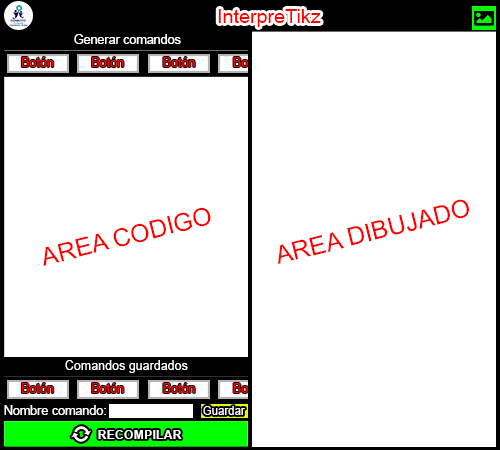
<style>
.page{position:relative;width:500px;height:450px;background:#ffffff}
.page>*{position:absolute;margin:0}
.t1{font:19.4px "ArialMT";color:#ff0000}
.t2{font:12.5px "ArialMT";color:#ffffff}
.t3{font:12.5px "ArialMT";color:#ff0000}
.t4{font:24.8px "ArialMT";color:#ff0000}
.t5{font:25px "ArialMT";color:#ff0000}
.t6{font:12.7px "ArialMT";color:#ffffff}
.t7{font:11.8px "ArialMT";color:#ffffff;scale:0.96 1}
.t8{font:12.5px "Arial-BoldMT";color:#ffffff}
</style>
<div class="page">
<p class="t1" style="left:218px;top:9px;width:103px;height:18px">InterpreTikz</p>
<p class="t2" style="left:74px;top:34px;width:107px;height:10px">Generar comandos</p>
<p class="t3" style="left:21px;top:57px;width:33px;height:10px">Botón</p>
<p class="t3" style="left:92px;top:57px;width:32px;height:10px">Botón</p>
<p class="t3" style="left:163px;top:57px;width:32px;height:10px">Botón</p>
<p class="t4" style="left:43px;top:207px;width:168px;height:59px;rotate:-14deg">AREA CODIGO</p>
<p class="t5" style="left:278px;top:199px;width:191px;height:65px;rotate:-14deg">AREA DIBUJADO</p>
<p class="t6" style="left:65px;top:360px;width:123px;height:13px">Comandos guardados</p>
<p class="t3" style="left:21px;top:383px;width:33px;height:10px">Botón</p>
<p class="t3" style="left:92px;top:383px;width:32px;height:10px">Botón</p>
<p class="t3" style="left:163px;top:383px;width:32px;height:10px">Botón</p>
<p class="t6" style="left:4px;top:405px;width:102px;height:10px">Nombre comando:</p>
<p class="t7" style="left:203px;top:406px;width:42px;height:9px">Guardar</p>
<p class="t8" style="left:98px;top:430px;width:84px;height:9px">RECOMPILAR</p>
</div>
